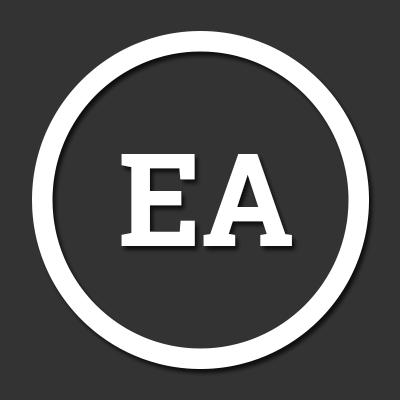
<style>
.page{position:relative;width:400px;height:400px;background:#333333}
.page>*{position:absolute;margin:0}
.t1{font:130px "RobotoSlab-Bold";color:#ffffff}
</style>
<div class="page">
<p class="t1" style="left:121px;top:154px;width:171px;height:92px">EA</p>
</div>
